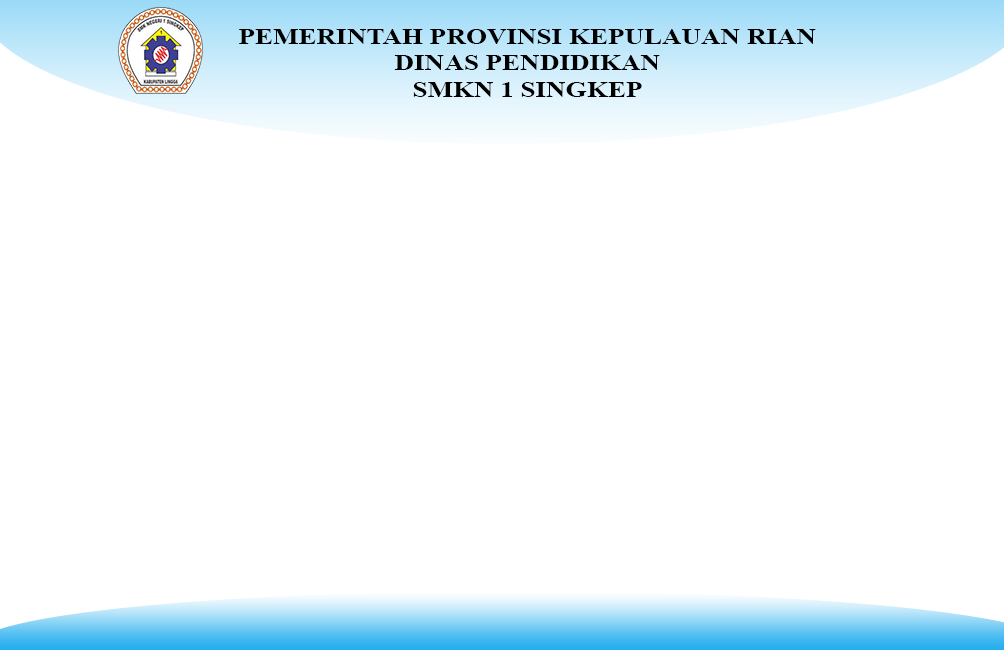
<style>
.page{position:relative;width:1004px;height:650px;background:#ffffff}
.page>*{position:absolute;margin:0}
.t1{font:22px "TimesNewRomanPS-BoldMT";color:#000000;scale:1.23 1}
</style>
<div class="page">
<p class="t1" style="left:239px;top:29px;width:577px;height:68px;text-align:center">PEMERINTAH PROVINSI KEPULAUAN RIAN<br>DINAS PENDIDIKAN<br>SMKN 1 SINGKEP</p>
</div>
